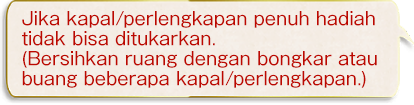
<style>
.page{position:relative;width:414px;height:105px}
.page>*{position:absolute;margin:0}
.t1{font:18px/20px "GothicMB101Pro-Regular";color:#bd0800}
</style>
<div class="page">
<p class="t1" style="left:22px;top:11px;width:355px;height:77px">Jika kapal/perlengkapan penuh hadiah<br>tidak bisa ditukarkan.<br>(Bersihkan ruang dengan bongkar atau<br>buang beberapa kapal/perlengkapan.)</p>
</div>
